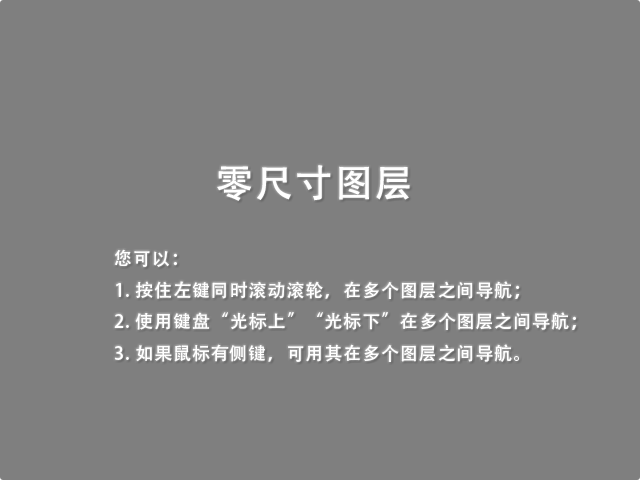
<style>
.page{position:relative;width:640px;height:480px;background:#7f7f7f}
.page>*{position:absolute;margin:0}
.t1{font:38px "AdobeHeitiStd-Regular";letter-spacing:0.05em;color:#ffffff}
.t2{font:18px "AdobeHeitiStd-Regular";letter-spacing:0.05em;color:#ffffff}
</style>
<div class="page">
<p class="t1" style="left:217px;top:165px;width:193px;height:36px">零尺寸图层</p>
<p class="t2" style="left:114px;top:249px;width:462px;height:113px">您可以：<br>1. 按住左键同时滚动滚轮，在多个图层之间导航；<br>2. 使用键盘“光标上”“光标下”在多个图层之间导航；<br>3. 如果鼠标有侧键，可用其在多个图层之间导航。</p>
</div>
